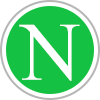
<style>
.page{position:relative;width:100px;height:100px;background:#15c142}
.page>*{position:absolute;margin:0}
.t1{font:83.3px "TimesNewRomanPSMT";letter-spacing:-0.01em;color:#ffffff}
</style>
<div class="page">
<p class="t1" style="left:19px;top:24px;width:61px;height:57px">N</p>
</div>
